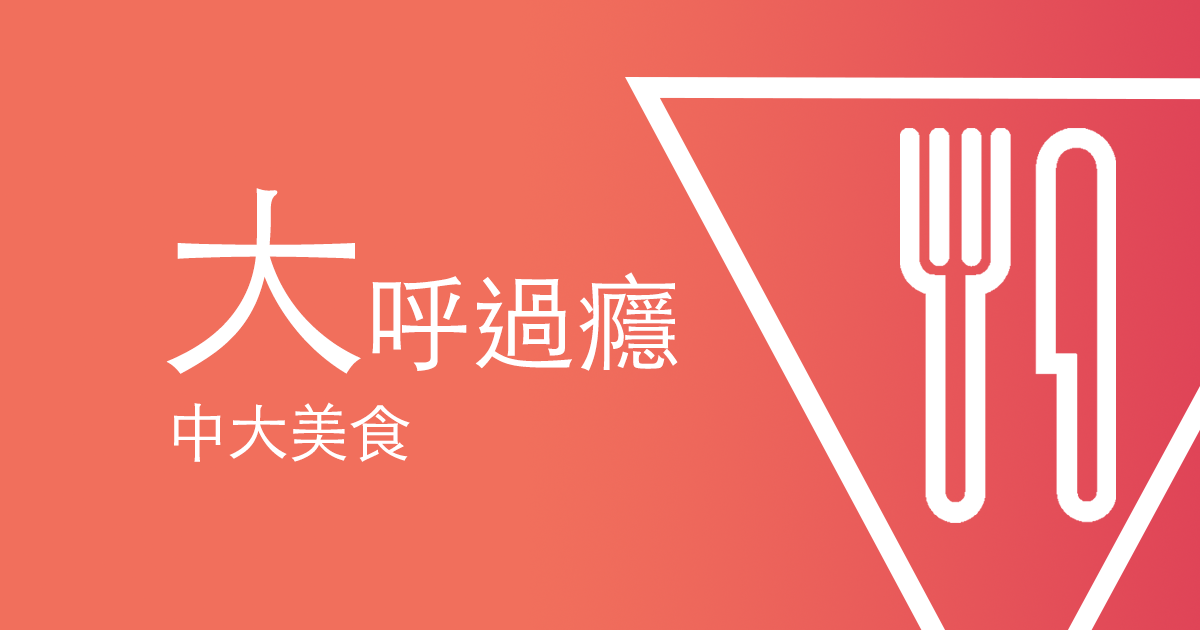
<style>
.page{position:relative;width:1200px;height:630px;background:#f16f5c}
.page>*{position:absolute;margin:0}
.t1{font:106.7px "STHeitiTC-Light";letter-spacing:-0.02em;color:#ffffff}
.t2{font:213.3px "STHeitiTC-Light";letter-spacing:-0.02em;color:#ffffff}
.t3{font:62.2px "STHeitiTC-Light";letter-spacing:-0.02em;color:#ffffff}
</style>
<div class="page">
<p class="t1" style="left:166px;top:188px;width:512px;height:186px"><span class="t2">大</span>呼過癮</p>
<p class="t3" style="left:174px;top:402px;width:236px;height:60px">中大美食</p>
</div>
